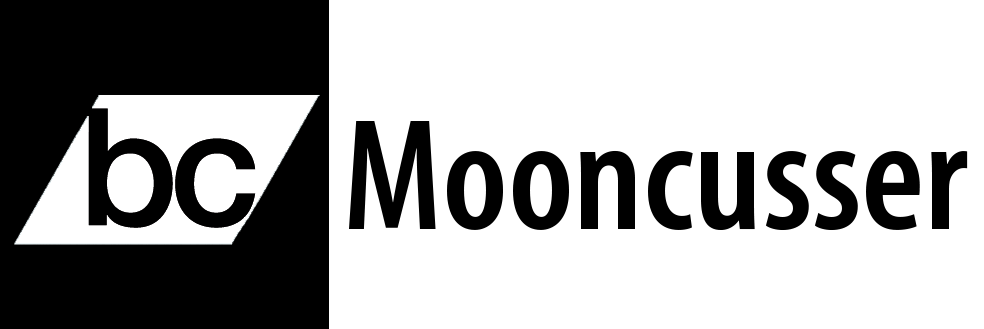
<style>
.page{position:relative;width:984px;height:329px;background:#ffffff}
.page>*{position:absolute;margin:0}
.t1{font:160px "MyriadPro-SemiboldCond";color:#000000}
</style>
<div class="page">
<p class="t1" style="left:349px;top:121px;width:619px;height:110px">Mooncusser</p>
</div>
